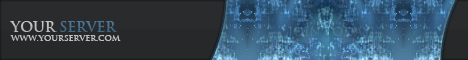
<style>
.page{position:relative;width:468px;height:60px;background:#26282a}
.page>*{position:absolute;margin:0}
.t1{font:14px "TrajanBold";letter-spacing:-0.01em;color:#436f8d}
.t2{font:14px "TrajanBold";letter-spacing:-0.01em;color:#c1c1c1}
.t3{font:12px "TrajanBold";letter-spacing:-0.01em;color:#466c8a}
.t4{font:8px "TrajanBold";letter-spacing:-0.01em;color:#c1c1c1}
</style>
<div class="page">
<p class="t1" style="left:10px;top:21px;width:107px;height:11px"><span class="t2">Your </span>Server</p>
<p class="t3" style="left:288px;top:27px;width:86px;height:12px">Join Today!</p>
<p class="t4" style="left:10px;top:35px;width:111px;height:6px">www.YourServer.com</p>
</div>
